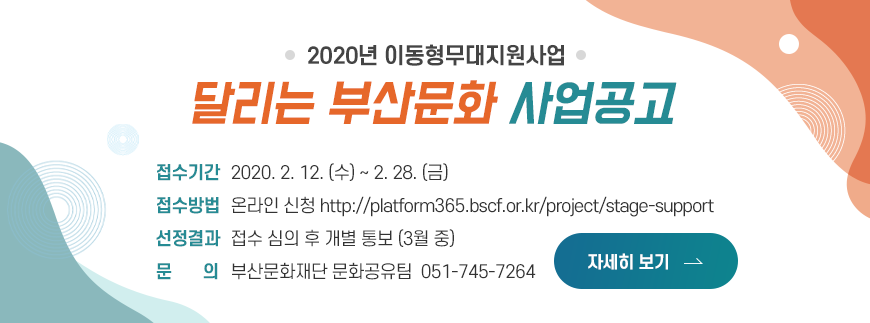
<style>
.page{position:relative;width:870px;height:323px;background:#ffffff}
.page>*{position:absolute;margin:0}
.t1{font:22px "S-CoreDream-6Bold";letter-spacing:-0.04em;color:#444444}
.t2{font:44px "BMDoHyeon";letter-spacing:-0.04em;color:#e6672a;font-weight:bold;font-style:italic}
.t3{font:44px "BMDoHyeon";letter-spacing:-0.04em;color:#268b94;font-weight:bold;font-style:italic}
.t4{font:17.5px/33px "S-CoreDream-6Bold";letter-spacing:-0.04em;color:#268b94}
.t5{font:17.5px/33px "S-CoreDream-4Regular";letter-spacing:-0.04em;color:#333333}
.t6{font:17px "S-CoreDream-6Bold";letter-spacing:-0.04em;color:#ffffff}
</style>
<div class="page">
<p class="t1" style="left:308px;top:44px;width:256px;height:22px">2020년 이동형무대지원사업</p>
<p class="t2" style="left:192px;top:80px;width:485px;height:44px">달리는 부산문화 <span class="t3">사업공고</span></p>
<p class="t4" style="left:156px;top:164px;width:65px;height:116px">접수기간<br>접수방법<br>선정결과<br>문       의</p>
<p class="t5" style="left:231px;top:163px;width:483px;height:117px">2020. 2. 12. (수) ~ 2. 28. (금)<br>온라인 신청 http://platform365.bscf.or.kr/project/stage-support <br>접수 심의 후 개별 통보 (3월 중)<br>부산문화재단 문화공유팀  051-745-7264</p>
<p class="t6" style="left:588px;top:253px;width:80px;height:17px">자세히 보기</p>
</div>
